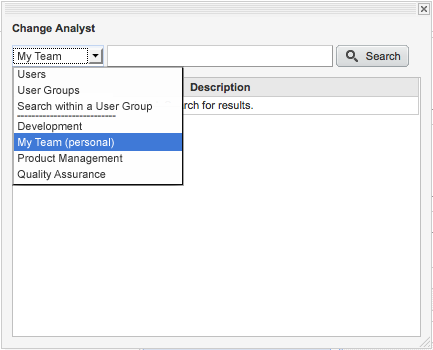
<style>
.page{position:relative;width:433px;height:350px;background:#ffffff}
.page>*{position:absolute;margin:0}
.t1{font:11px "ArialMT";color:#333333}
.t2{font:11px/16px "ArialMT";color:#333333}
.t3{font:11px/20px "ArialMT";color:#333333}
.t4{font:11px/16px "ArialMT";color:#ffffff}
</style>
<div class="page">
<p class="t1" style="left:18px;top:52px;width:43px;height:11px">My Team</p>
<p class="t2" style="left:17px;top:70px;width:135px;height:111px">Users<br>User Groups<br>Search within a User Group<br><span class="t3">Development<br></span><span class="t4">My Team (personal)<br></span>Product Management<br>Quality Assurance</p>
</div>
